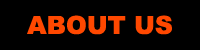
<style>
.page{position:relative;width:200px;height:50px;background:#000000}
.page>*{position:absolute;margin:0}
.t1{font:25px "Arial-Black";color:#ff4800}
</style>
<div class="page">
<p class="t1" style="left:27px;top:15px;width:145px;height:20px">ABOUT US</p>
</div>
